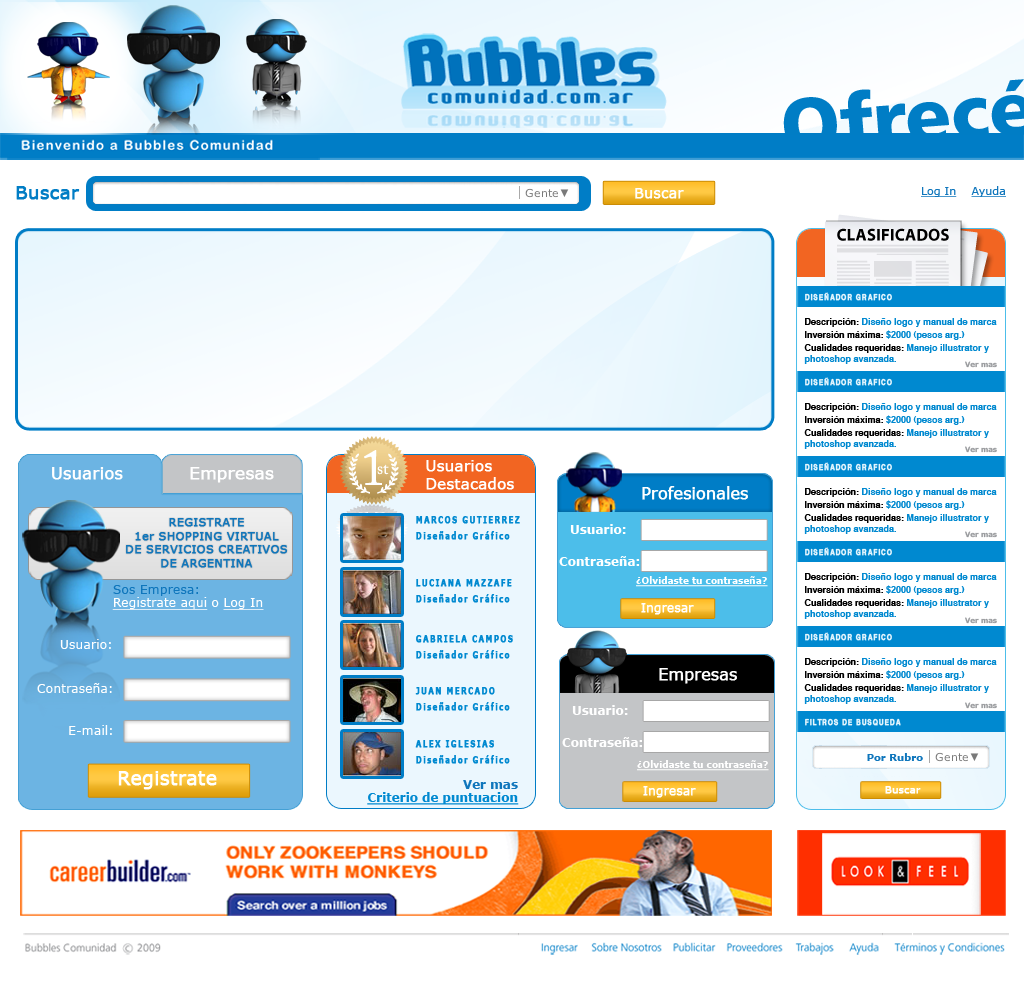
<style>
.page{position:relative;width:1024px;height:993px;background:#ffffff}
.page>*{position:absolute;margin:0}
.t1{font:18px "Verdana";color:#017dc5;font-weight:bold}
.t2{font:14px "Verdana";color:#ffffff;font-weight:bold}
.t3{font:11px "Verdana";color:#0f76bc;text-decoration:underline}
.t4{font:8px "Helvetica-Bold";letter-spacing:0.14em;color:#e4f5fd;font-weight:bold;scale:0.8 1}
.t5{font:9px "Helvetica-Bold";color:#0089d0}
.t6{font:9px "Helvetica-Bold";color:#000000}
.t7{font:9px/11px "Helvetica-Bold";color:#0089d0}
.t8{font:9px/11px "Helvetica-Bold";color:#000000}
.t9{font:8px/11px "Helvetica-Bold"}
.t10{font:7px "Verdana-Bold";color:#97999c}
.t11{font:14.8px "Verdana";color:#ffffff;font-weight:bold}
.t12{font:16px "Verdana";color:#ffffff;font-weight:bold}
.t13{font:16.6px "Verdana";color:#ffffff;font-weight:bold}
.t14{font:16px "Verdana";letter-spacing:-0.02em;color:#ffffff;font-weight:bold}
.t15{font:11.4px/13.6px "Verdana";color:#0f76bc;font-weight:bold}
.t16{font:9.2px "Verdana-Bold";letter-spacing:0.14em;color:#0089d0;font-weight:bold;scale:0.8 1}
.t17{font:12px "Verdana-Bold";color:#ffffff}
.t18{font:9px "Verdana-Bold";color:#ffffff;text-decoration:underline}
.t19{font:12.5px/13.6px "Verdana";color:#ffffff;text-decoration:underline}
.t20{font:12.5px/13.6px "Verdana";color:#0f76bc}
.t21{font:12.5px/13.6px "Verdana";color:#ffffff}
.t22{font:11.8px "Verdana";color:#ffffff;font-weight:bold}
.t23{font:12.5px "Verdana";color:#ffffff}
.t24{font:10px "Verdana-Bold";color:#0f76bc}
.t25{font:18.7px "Verdana";color:#ffffff;font-weight:bold}
.t26{font:12px/13.1px "Verdana-Bold";color:#0089d0;text-decoration:underline}
.t27{font:12px/13.1px "Verdana-Bold";color:#0f76bc}
.t28{font:10px "Verdana";color:#ffffff;font-weight:bold}
</style>
<div class="page">
<p class="t1" style="left:16px;top:186px;width:64px;height:14px">Buscar</p>
<p class="t2" style="left:635px;top:188px;width:49px;height:11px">Buscar</p>
<p class="t3" style="left:921px;top:186px;width:85px;height:11px">Log In    Ayuda</p>
<p class="t4" style="left:805px;top:292px;width:87px;height:9px">DISEÑADOR GRAFICO</p>
<p class="t4" style="left:805px;top:292px;width:87px;height:9px">DISEÑADOR GRAFICO</p>
<p class="t5" style="left:805px;top:318px;width:192px;height:9px"><span class="t6">Descripción:</span> Diseño logo y manual de marca</p>
<p class="t5" style="left:805px;top:330px;width:160px;height:10px"><span class="t6">Inversión máxima: </span>$2000 (pesos arg.)</p>
<p class="t7" style="left:804px;top:344px;width:185px;height:20px"><span class="t8">Cualidades requeridas: </span>Manejo illustrator y<br>photoshop avanzada.</p>
<p class="t9" style="left:805px;top:345px;width:165px;height:19px">Cualidades requeridas: Manejo illustartor y<br>photoshop avanzada.</p>
<p class="t10" style="left:965px;top:361px;width:32px;height:7px">Ver mas</p>
<p class="t4" style="left:805px;top:377px;width:87px;height:9px">DISEÑADOR GRAFICO</p>
<p class="t5" style="left:805px;top:403px;width:192px;height:9px"><span class="t6">Descripción:</span> Diseño logo y manual de marca</p>
<p class="t5" style="left:805px;top:415px;width:160px;height:10px"><span class="t6">Inversión máxima: </span>$2000 (pesos arg.)</p>
<p class="t7" style="left:804px;top:429px;width:185px;height:20px"><span class="t8">Cualidades requeridas: </span>Manejo illustrator y<br>photoshop avanzada.</p>
<p class="t10" style="left:965px;top:446px;width:32px;height:7px">Ver mas</p>
<p class="t11" style="left:426px;top:460px;width:88px;height:30px">Usuarios<br>Destacados</p>
<p class="t4" style="left:805px;top:462px;width:87px;height:9px">DISEÑADOR GRAFICO</p>
<p class="t12" style="left:52px;top:467px;width:71px;height:13px">Usuarios</p>
<p class="t13" style="left:190px;top:467px;width:84px;height:16px">Empresas</p>
<p class="t14" style="left:642px;top:486px;width:106px;height:14px">Profesionales</p>
<p class="t5" style="left:805px;top:488px;width:192px;height:9px"><span class="t6">Descripción:</span> Diseño logo y manual de marca</p>
<p class="t5" style="left:805px;top:500px;width:160px;height:10px"><span class="t6">Inversión máxima: </span>$2000 (pesos arg.)</p>
<p class="t15" style="left:126px;top:518px;width:162px;height:50px;text-align:center">REGISTRATE<br>1er SHOPPING VIRTUAL<br>DE SERVICIOS CREATIVOS<br>DE ARGENTINA</p>
<p class="t16" style="left:416px;top:516px;width:104px;height:8px">MARCOS GUTIERREZ</p>
<p class="t7" style="left:804px;top:514px;width:185px;height:20px"><span class="t8">Cualidades requeridas: </span>Manejo illustrator y<br>photoshop avanzada.</p>
<p class="t16" style="left:416px;top:531px;width:94px;height:9px">Diseñador Gráfico</p>
<p class="t17" style="left:570px;top:524px;width:56px;height:10px">Usuario:</p>
<p class="t10" style="left:965px;top:531px;width:32px;height:7px">Ver mas</p>
<p class="t17" style="left:559px;top:556px;width:81px;height:10px">Contraseña:</p>
<p class="t4" style="left:805px;top:547px;width:87px;height:9px">DISEÑADOR GRAFICO</p>
<p class="t16" style="left:416px;top:579px;width:96px;height:8px">LUCIANA MAZZAFE</p>
<p class="t18" style="left:636px;top:576px;width:132px;height:11px">¿Olvidaste tu contraseña?</p>
<p class="t5" style="left:805px;top:573px;width:192px;height:9px"><span class="t6">Descripción:</span> Diseño logo y manual de marca</p>
<p class="t19" style="left:112px;top:585px;width:152px;height:25px"><span class="t20">Sos Empresa:<br></span>Registrate aqui<span class="t21"> o </span>Log In</p>
<p class="t5" style="left:805px;top:585px;width:160px;height:10px"><span class="t6">Inversión máxima: </span>$2000 (pesos arg.)</p>
<p class="t16" style="left:416px;top:594px;width:94px;height:9px">Diseñador Gráfico</p>
<p class="t22" style="left:641px;top:603px;width:53px;height:12px">Ingresar</p>
<p class="t7" style="left:804px;top:599px;width:185px;height:20px"><span class="t8">Cualidades requeridas: </span>Manejo illustrator y<br>photoshop avanzada.</p>
<p class="t10" style="left:965px;top:617px;width:32px;height:7px">Ver mas</p>
<p class="t23" style="left:60px;top:639px;width:51px;height:10px">Usuario:</p>
<p class="t16" style="left:416px;top:635px;width:97px;height:8px">GABRIELA CAMPOS</p>
<p class="t4" style="left:805px;top:632px;width:87px;height:9px">DISEÑADOR GRAFICO</p>
<p class="t4" style="left:805px;top:632px;width:87px;height:9px">DISEÑADOR GRAFICO</p>
<p class="t16" style="left:416px;top:650px;width:94px;height:9px">Diseñador Gráfico</p>
<p class="t5" style="left:805px;top:658px;width:192px;height:9px"><span class="t6">Descripción:</span> Diseño logo y manual de marca</p>
<p class="t5" style="left:805px;top:658px;width:192px;height:9px"><span class="t6">Descripción:</span> Diseño logo y manual de marca</p>
<p class="t14" style="left:659px;top:668px;width:78px;height:16px">Empresas</p>
<p class="t5" style="left:805px;top:670px;width:160px;height:10px"><span class="t6">Inversión máxima: </span>$2000 (pesos arg.)</p>
<p class="t5" style="left:805px;top:670px;width:160px;height:10px"><span class="t6">Inversión máxima: </span>$2000 (pesos arg.)</p>
<p class="t23" style="left:37px;top:683px;width:75px;height:10px">Contraseña:</p>
<p class="t16" style="left:415px;top:687px;width:80px;height:8px">JUAN MERCADO</p>
<p class="t7" style="left:804px;top:684px;width:185px;height:20px"><span class="t8">Cualidades requeridas: </span>Manejo illustrator y<br>photoshop avanzada.</p>
<p class="t7" style="left:804px;top:684px;width:185px;height:20px"><span class="t8">Cualidades requeridas: </span>Manejo illustrator y<br>photoshop avanzada.</p>
<p class="t16" style="left:416px;top:702px;width:94px;height:9px">Diseñador Gráfico</p>
<p class="t10" style="left:965px;top:702px;width:32px;height:7px">Ver mas</p>
<p class="t17" style="left:572px;top:705px;width:56px;height:10px">Usuario:</p>
<p class="t23" style="left:69px;top:725px;width:43px;height:10px">E-mail:</p>
<p class="t4" style="left:805px;top:718px;width:96px;height:8px">FILTROS DE BUSQUEDA</p>
<p class="t17" style="left:562px;top:737px;width:81px;height:10px">Contraseña:</p>
<p class="t16" style="left:415px;top:740px;width:79px;height:8px">ALEX IGLESIAS</p>
<p class="t16" style="left:416px;top:755px;width:94px;height:9px">Diseñador Gráfico</p>
<p class="t18" style="left:637px;top:760px;width:132px;height:11px">¿Olvidaste tu contraseña?</p>
<p class="t24" style="left:867px;top:753px;width:56px;height:8px">Por Rubro</p>
<p class="t25" style="left:118px;top:771px;width:99px;height:19px">Registrate</p>
<p class="t26" style="left:367px;top:780px;width:152px;height:25px;text-align:right"><span class="t27">Ver mas<br></span>Criterio de puntuacion</p>
<p class="t22" style="left:643px;top:786px;width:53px;height:12px">Ingresar</p>
<p class="t28" style="left:885px;top:786px;width:36px;height:8px">Buscar</p>
</div>
